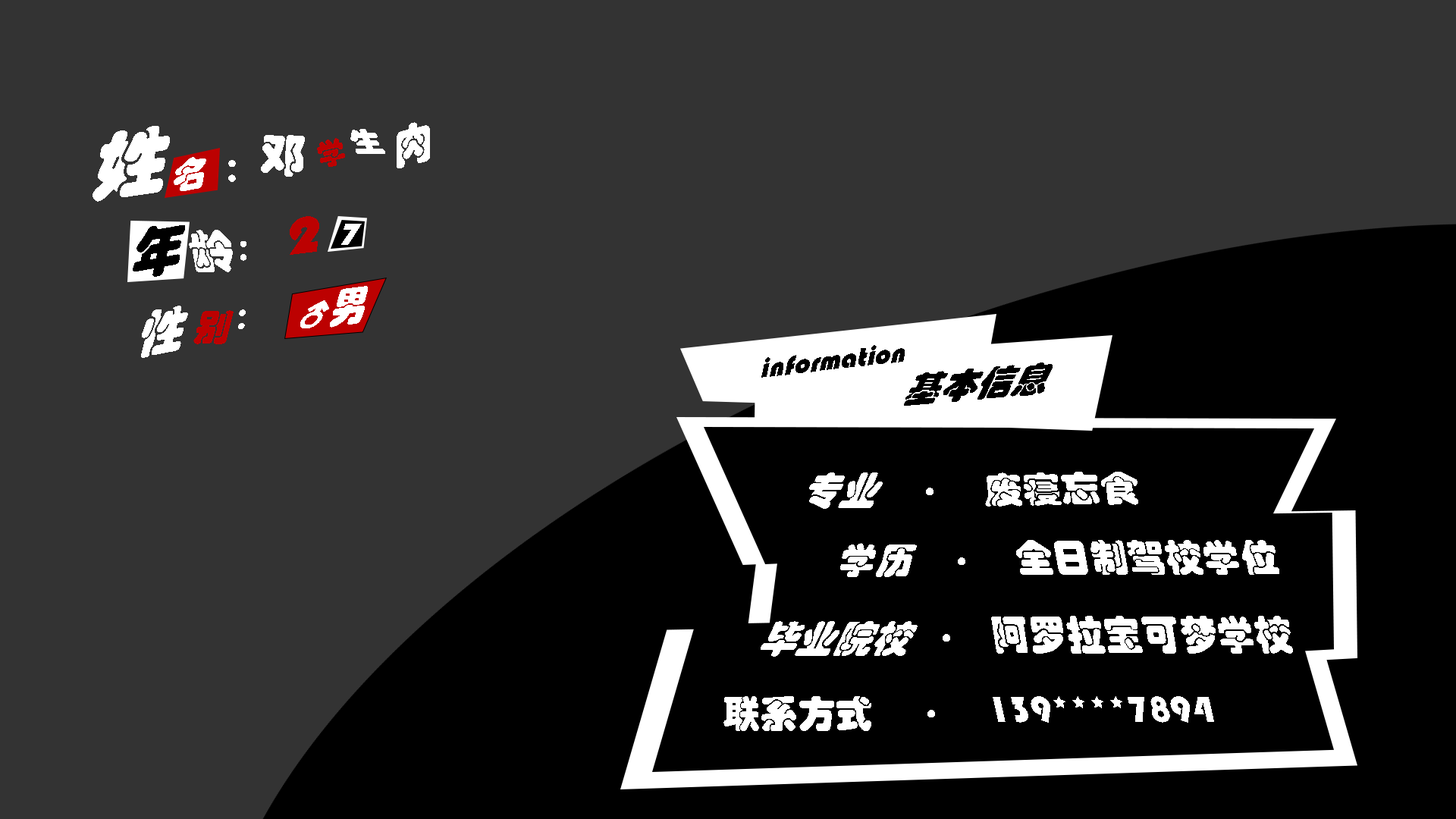
<style>
.page{position:relative;width:1456px;height:819px;background:#333333}
.page>*{position:absolute;margin:0}
.t1{font:75.4px "STHupo";color:#ffffff}
.t2{font:45.5px "STHupo";color:#ffffff;scale:0.87 1}
.t3{font:45.5px "STHupo";color:#ffffff}
.t4{font:30.4px "STHupo";color:#ffffff;scale:1.06 1}
.t5{font:29.6px "STHupo";color:#bc0101}
.t6{font:36.4px "STHupo";color:#ffffff;scale:0.95 1}
.t7{font:30.3px "STHupo";color:#ffffff}
.t8{font:54.6px "STHupo";color:#bc0101;scale:1.17 1}
.t9{font:57.7px "STHupo";color:#000000;scale:0.91 1}
.t10{font:46.2px "STHupo";color:#ffffff}
.t11{font:33px "STHupo";color:#ffffff;scale:1.1 1}
.t12{font:27.3px "STHupo";color:#ffffff}
.t13{font:42.6px "STHupo";color:#ffffff;scale:0.87 1}
.t14{font:53.2px "STHupo";color:#ffffff;scale:0.9 1}
.t15{font:46px "STHupo";color:#ffffff;scale:0.93 1}
.t16{font:37.3px "STHupo";color:#bc0101}
.t17{font:28.7px "STHupo";color:#000000}
.t18{font:39.4px "STHupo";color:#000000;scale:0.91 1}
.t19{font:42.4px "STHupo";color:#ffffff;scale:0.89 1}
.t20{font:35.8px "STHupo";color:#ffffff;scale:1.09 1}
.t21{font:37.6px "STHupo";color:#ffffff}
.t22{font:37.1px "STHupo";color:#ffffff}
.t23{font:38.2px "STHupo";color:#ffffff}
.t24{font:41.2px "STHupo";color:#ffffff;scale:0.91 1}
.t25{font:41.4px "STHupo";color:#ffffff;scale:0.91 1}
.t26{font:38.5px "STHupo";color:#ffffff}
</style>
<div class="page">
<p class="t1" style="left:93px;top:126px;width:77px;height:76px;rotate:-8deg">姓</p>
<p class="t2" style="left:397px;top:122px;width:33px;height:46px;rotate:-14deg">肉</p>
<p class="t3" style="left:261px;top:135px;width:44px;height:42px;rotate:4deg">邓</p>
<p class="t4" style="left:350px;top:129px;width:35px;height:25px">生</p>
<p class="t5" style="left:317px;top:138px;width:28px;height:29px;rotate:-12deg">学</p>
<p class="t6" style="left:174px;top:157px;width:32px;height:34px;rotate:-11deg">名</p>
<p class="t7" style="left:228px;top:160px;width:8px;height:22px">：</p>
<p class="t8" style="left:290px;top:216px;width:29px;height:39px;rotate:-7deg">2</p>
<p class="t9" style="left:133px;top:225px;width:52px;height:52px;rotate:-10deg">年</p>
<p class="t10" style="left:189px;top:230px;width:44px;height:42px">龄</p>
<p class="t11" style="left:341px;top:224px;width:21px;height:21px">7</p>
<p class="t12" style="left:240px;top:241px;width:6px;height:20px">：</p>
<p class="t13" style="left:330px;top:286px;width:38px;height:42px;rotate:-7deg">男</p>
<p class="t14" style="left:141px;top:306px;width:47px;height:52px;rotate:-11deg">性</p>
<p class="t15" style="left:300px;top:300px;width:29px;height:28px">♂</p>
<p class="t16" style="left:193px;top:310px;width:41px;height:34px">别</p>
<p class="t12" style="left:238px;top:309px;width:8px;height:20px;rotate:-8deg">：</p>
<p class="t17" style="left:761px;top:345px;width:144px;height:33px;rotate:-7deg">information</p>
<p class="t18" style="left:904px;top:362px;width:149px;height:44px;rotate:-5deg">基本信息</p>
<p class="t19" style="left:809px;top:472px;width:74px;height:37px">专业</p>
<p class="t20" style="left:985px;top:472px;width:153px;height:35px;rotate:-1deg">废寝忘食</p>
<p class="t21" style="left:926px;top:488px;width:7px;height:7px">·</p>
<p class="t22" style="left:840px;top:543px;width:77px;height:34px">学历</p>
<p class="t23" style="left:1016px;top:540px;width:263px;height:35px">全日制驾校学位</p>
<p class="t21" style="left:958px;top:557px;width:7px;height:8px">·</p>
<p class="t24" style="left:991px;top:616px;width:302px;height:38px">阿罗拉宝可梦学校</p>
<p class="t25" style="left:761px;top:621px;width:157px;height:36px">毕业院校</p>
<p class="t21" style="left:943px;top:634px;width:7px;height:8px">·</p>
<p class="t21" style="left:723px;top:696px;width:148px;height:35px">联系方式</p>
<p class="t26" style="left:993px;top:696px;width:221px;height:27px">139****7894</p>
<p class="t21" style="left:927px;top:710px;width:8px;height:7px">·</p>
</div>
